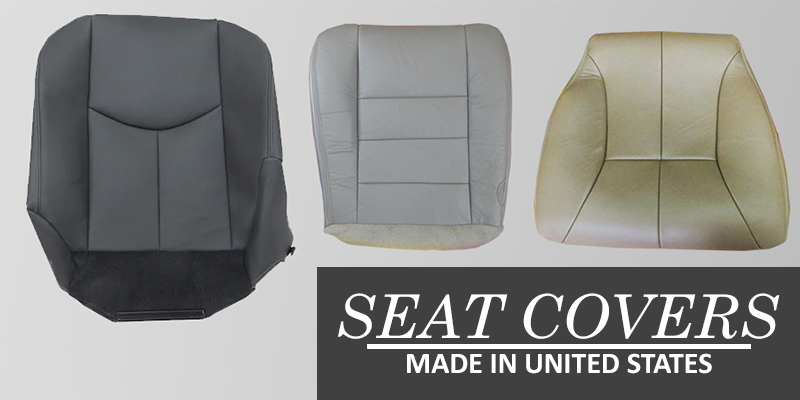
<style>
.page{position:relative;width:800px;height:400px}
.page>*{position:absolute;margin:0}
.t1{font:60px "CenturySchoolbook-Italic";color:#ffffff}
.t2{font:30px "Calibri-Bold";color:#ffffff}
</style>
<div class="page">
<p class="t1" style="left:338px;top:293px;width:442px;height:46px">SEAT COVERS</p>
<p class="t2" style="left:407px;top:353px;width:305px;height:21px">MADE IN UNITED STATES</p>
</div>
